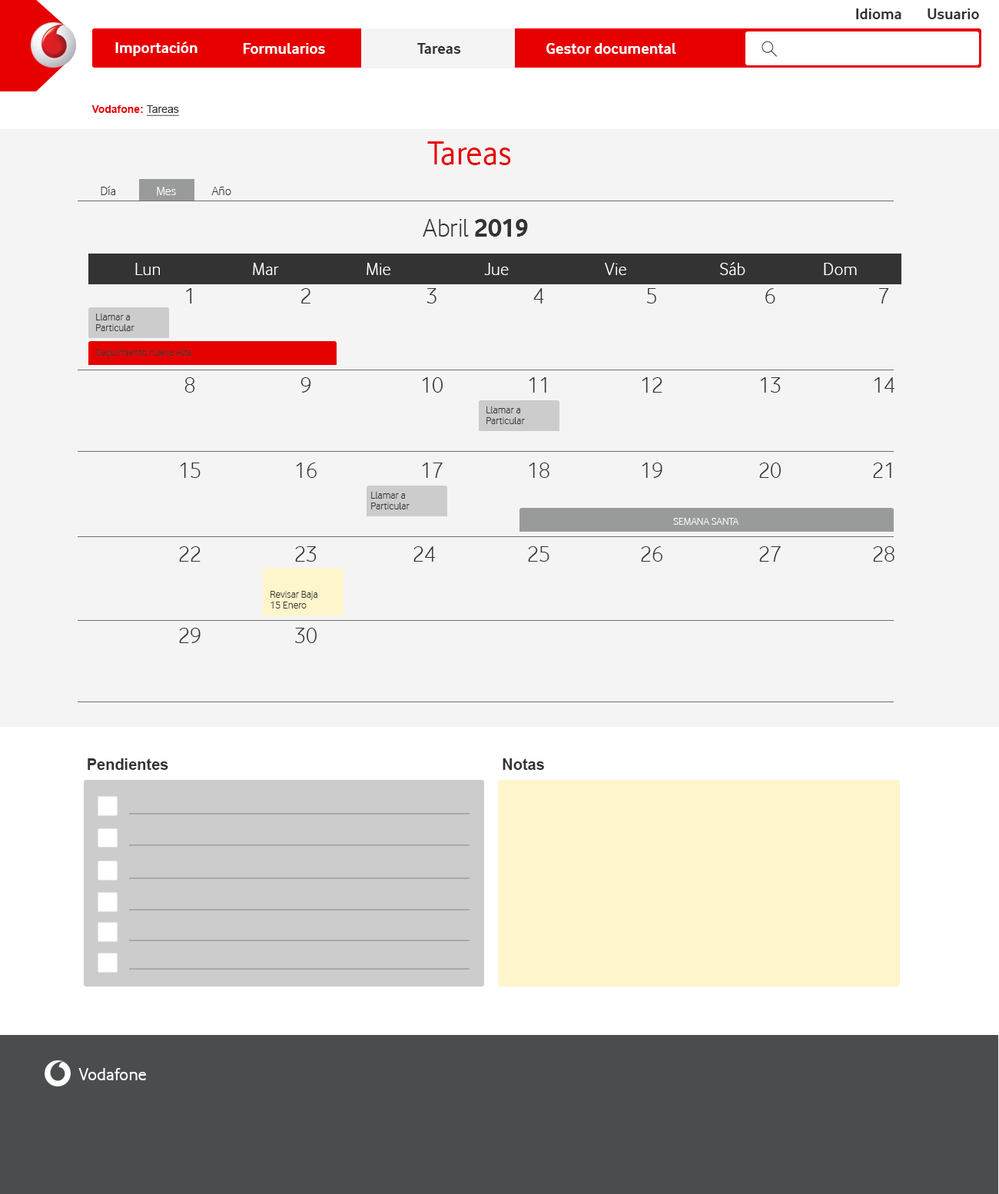
<style>
.page{position:relative;width:999px;height:1194px;background:#f4f4f4}
.page>*{position:absolute;margin:0}
.t1{font:16.1px "VodafoneRg-Bold";color:#333333}
.t2{font:16.1px "VodafoneRg-Bold";color:#ffffff}
.t3{font:10.8px "Arial-BoldMT";color:#e60000}
.t4{font:10.8px "ArialMT";color:#333333;text-decoration:underline}
.t5{font:34.6px "VodafoneRg-Regular";color:#e60000}
.t6{font:12.9px "VodafoneLt-Regular";color:#333333}
.t7{font:12.9px "VodafoneLt-Regular";color:#ffffff}
.t8{font:26.6px "VodafoneLt-Regular";color:#333333}
.t9{font:26.6px "VodafoneRg-Bold";color:#333333}
.t10{font:18.6px "VodafoneLt-Regular";color:#ffffff}
.t11{font:23px "VodafoneLt-Regular";color:#333333}
.t12{font:10.8px/10.8px "VodafoneLt-Regular";color:#333333}
.t13{font:10.8px "VodafoneLt-Regular";color:#333333}
.t14{font:10.8px "VodafoneLt-Regular";color:#ffffff}
.t15{font:15.4px "Arial-BoldMT";color:#333333}
.t16{font:18.4px "VodafoneRg-Regular";color:#ffffff}
</style>
<div class="page">
<p class="t1" style="left:856px;top:8px;width:45px;height:11px">Idioma</p>
<p class="t1" style="left:927px;top:8px;width:52px;height:11px">Usuario</p>
<p class="t2" style="left:115px;top:41px;width:82px;height:15px">Importación</p>
<p class="t2" style="left:244px;top:43px;width:81px;height:11px">Formularios</p>
<p class="t1" style="left:417px;top:43px;width:44px;height:11px">Tareas</p>
<p class="t2" style="left:546px;top:43px;width:130px;height:11px">Gestor documental</p>
<p class="t3" style="left:91px;top:105px;width:88px;height:11px">Vodafone: <span class="t4">Tareas</span></p>
<p class="t5" style="left:427px;top:141px;width:84px;height:24px">Tareas</p>
<p class="t6" style="left:101px;top:186px;width:14px;height:9px">Día</p>
<p class="t7" style="left:157px;top:187px;width:19px;height:9px">Mes</p>
<p class="t6" style="left:211px;top:187px;width:20px;height:8px">Año</p>
<p class="t8" style="left:423px;top:219px;width:105px;height:18px">Abril <span class="t9">2019</span></p>
<p class="t10" style="left:135px;top:263px;width:25px;height:12px">Lun</p>
<p class="t10" style="left:253px;top:263px;width:26px;height:12px">Mar</p>
<p class="t10" style="left:366px;top:263px;width:24px;height:12px">Mie</p>
<p class="t10" style="left:484px;top:263px;width:25px;height:12px">Jue</p>
<p class="t10" style="left:605px;top:263px;width:21px;height:12px">Vie</p>
<p class="t10" style="left:720px;top:262px;width:25px;height:13px">Sáb</p>
<p class="t10" style="left:824px;top:263px;width:33px;height:12px">Dom</p>
<p class="t11" style="left:186px;top:288px;width:6px;height:15px">1</p>
<p class="t11" style="left:301px;top:288px;width:9px;height:15px">2</p>
<p class="t11" style="left:426px;top:288px;width:10px;height:15px">3</p>
<p class="t11" style="left:533px;top:288px;width:11px;height:15px">4</p>
<p class="t11" style="left:646px;top:288px;width:10px;height:15px">5</p>
<p class="t11" style="left:765px;top:288px;width:10px;height:15px">6</p>
<p class="t11" style="left:879px;top:288px;width:10px;height:15px">7</p>
<p class="t12" style="left:96px;top:313px;width:38px;height:18px">Llamar a<br>Particular</p>
<p class="t13" style="left:95px;top:349px;width:96px;height:9px">Seguimiento nueva Alta</p>
<p class="t11" style="left:184px;top:377px;width:11px;height:16px">8</p>
<p class="t11" style="left:300px;top:377px;width:11px;height:16px">9</p>
<p class="t11" style="left:422px;top:377px;width:21px;height:16px">10</p>
<p class="t11" style="left:529px;top:377px;width:17px;height:16px">11</p>
<p class="t11" style="left:642px;top:377px;width:20px;height:16px">12</p>
<p class="t11" style="left:760px;top:377px;width:21px;height:16px">13</p>
<p class="t11" style="left:874px;top:377px;width:20px;height:16px">14</p>
<p class="t12" style="left:486px;top:406px;width:39px;height:18px">Llamar a<br>Particular</p>
<p class="t11" style="left:180px;top:463px;width:21px;height:15px">15</p>
<p class="t11" style="left:296px;top:463px;width:21px;height:15px">16</p>
<p class="t11" style="left:422px;top:463px;width:21px;height:15px">17</p>
<p class="t11" style="left:529px;top:463px;width:20px;height:15px">18</p>
<p class="t11" style="left:642px;top:463px;width:20px;height:15px">19</p>
<p class="t11" style="left:759px;top:463px;width:22px;height:15px">20</p>
<p class="t11" style="left:873px;top:463px;width:18px;height:15px">21</p>
<p class="t12" style="left:371px;top:492px;width:38px;height:17px">Llamar a<br>Particular</p>
<p class="t14" style="left:673px;top:518px;width:66px;height:8px">SEMANA SANTA</p>
<p class="t11" style="left:179px;top:546px;width:22px;height:16px">22</p>
<p class="t11" style="left:295px;top:546px;width:22px;height:16px">23</p>
<p class="t11" style="left:413px;top:546px;width:22px;height:16px">24</p>
<p class="t11" style="left:528px;top:546px;width:21px;height:16px">25</p>
<p class="t11" style="left:641px;top:546px;width:21px;height:16px">26</p>
<p class="t11" style="left:759px;top:546px;width:22px;height:16px">27</p>
<p class="t11" style="left:873px;top:546px;width:21px;height:16px">28</p>
<p class="t12" style="left:270px;top:591px;width:47px;height:17px">Revisar Baja<br>15 Enero</p>
<p class="t11" style="left:179px;top:628px;width:22px;height:15px">29</p>
<p class="t11" style="left:295px;top:628px;width:22px;height:15px">30</p>
<p class="t15" style="left:88px;top:758px;width:80px;height:12px">Pendientes</p>
<p class="t15" style="left:502px;top:758px;width:42px;height:12px">Notas</p>
<p class="t16" style="left:78px;top:1068px;width:69px;height:12px">Vodafone</p>
</div>
